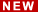
<style>
.page{position:relative;width:38px;height:12px;background:#c00000}
.page>*{position:absolute;margin:0}
.t1{font:12px "Arial-BoldMT";letter-spacing:0.15em;color:#ffffff}
</style>
<div class="page">
<p class="t1" style="left:3px;top:1px;width:31px;height:10px">NEW</p>
</div>
